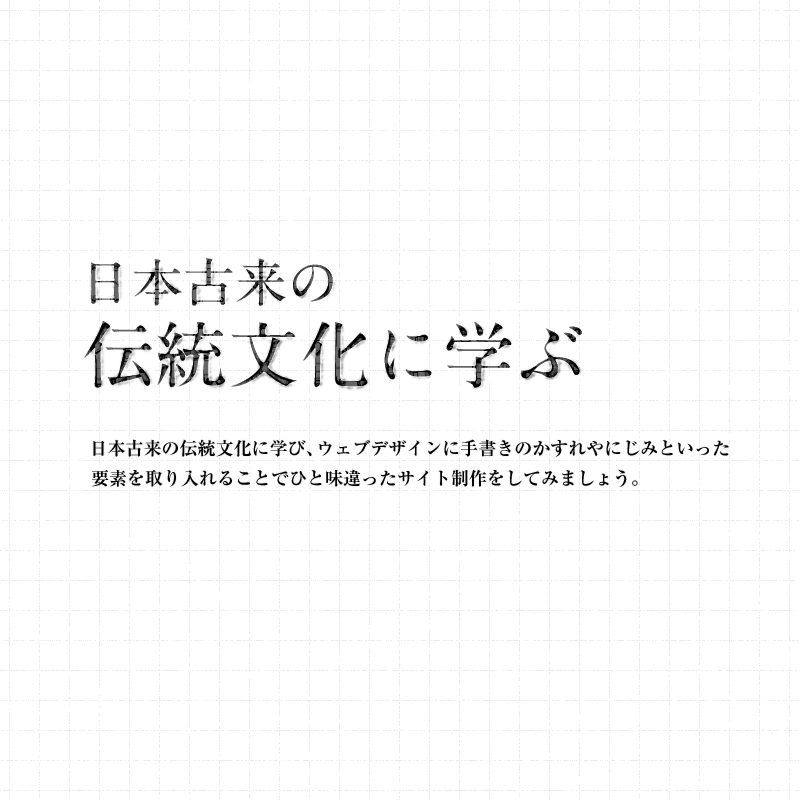
<style>
.page{position:relative;width:800px;height:800px;background:#ffffff}
.page>*{position:absolute;margin:0}
.t1{font:72px/62px "A1MinchoStd-Bold"}
.t2{font:52px/62px "A1MinchoStd-Bold"}
.t3{font:18px/30px "RyuminPro-Bold";color:#000000}
</style>
<div class="page">
<p class="t1" style="left:84px;top:258px;width:498px;height:130px"><span class="t2">日本古来の<br></span>伝統文化に学ぶ</p>
<p class="t1" style="left:84px;top:258px;width:498px;height:130px"><span class="t2">日本古来の<br></span>伝統文化に学ぶ</p>
<p class="t3" style="left:91px;top:439px;width:638px;height:48px">日本古来の伝統文化に学び、ウェブデザインに手書きのかすれやにじみといった<br>要素を取り入れることでひと味違ったサイト制作をしてみましょう。</p>
</div>
